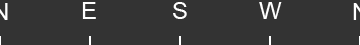
<style>
.page{position:relative;width:360px;height:45px;background:#333333}
.page>*{position:absolute;margin:0}
.t1{font:24px "ArialMT";color:#ffffff}
</style>
<div class="page">
<p class="t1" style="left:82px;top:2px;width:14px;height:17px">E</p>
<p class="t1" style="left:173px;top:2px;width:14px;height:17px">S</p>
<p class="t1" style="left:259px;top:2px;width:23px;height:17px">W</p>
</div>
